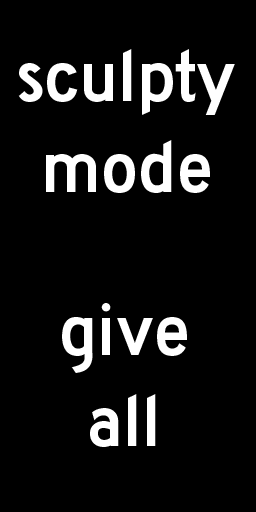
<style>
.page{position:relative;width:256px;height:512px;background:#000000}
.page>*{position:absolute;margin:0}
.t1{font:75.8px "Roadgeek2005SeriesD";color:#ffffff}
</style>
<div class="page">
<p class="t1" style="left:18px;top:49px;width:217px;height:144px;text-align:center">sculpty<br>mode</p>
<p class="t1" style="left:62px;top:303px;width:125px;height:144px;text-align:center">give<br>all</p>
</div>
